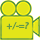
<style>
.page{position:relative;width:40px;height:40px;background:#e3e519}
.page>*{position:absolute;margin:0}
.t1{font:10px "MyriadPro-BoldIt";color:#659b46}
</style>
<div class="page">
<p class="t1" style="left:6px;top:22px;width:23px;height:8px">+/-=?</p>
</div>
